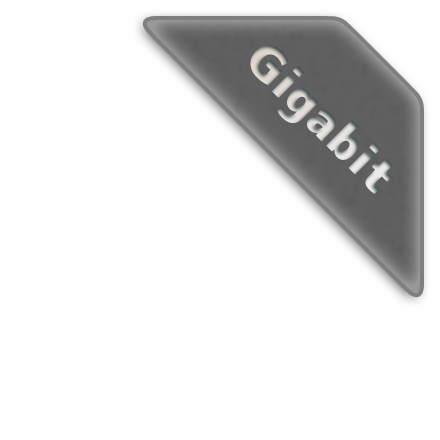
<style>
.page{position:relative;width:440px;height:440px;background:#ffffff}
.page>*{position:absolute;margin:0}
.t1{font:48px "mplus-1p-black"}
</style>
<div class="page">
<p class="t1" style="left:250px;top:45px;width:143px;height:149px;rotate:45deg">Gigabit</p>
</div>
